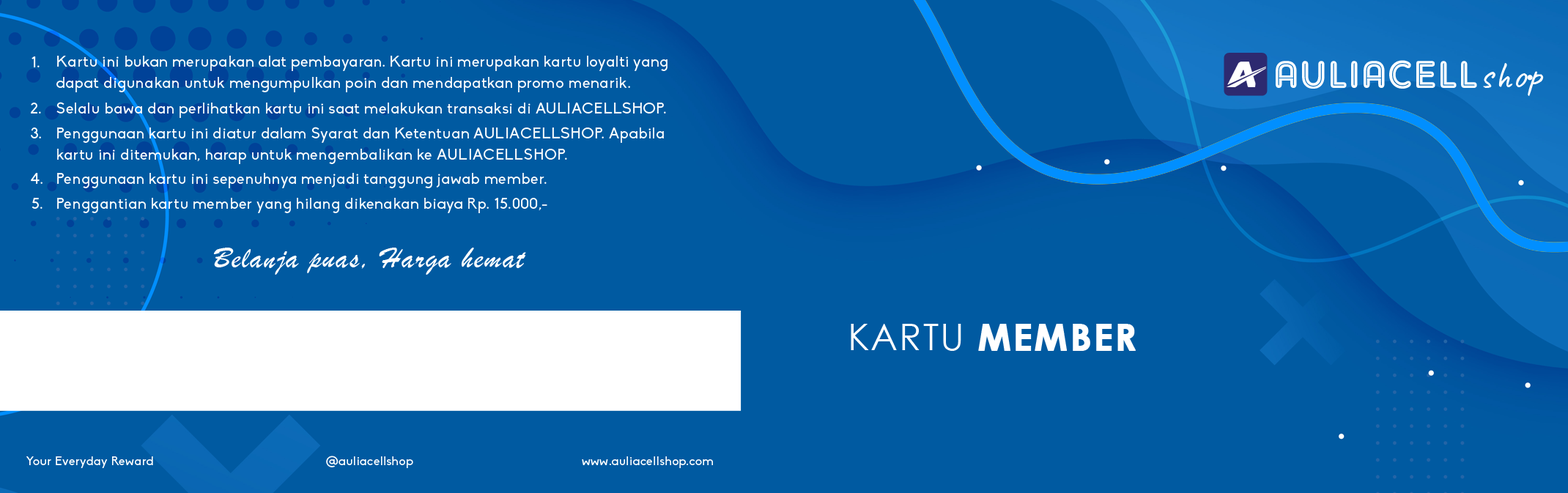
<style>
.page{position:relative;width:1568px;height:493px;background:#005aa1}
.page>*{position:absolute;margin:0}
.t1{font:15.3px "Biko";letter-spacing:0.04em;color:#ffffff}
.t2{font:15.3px/21.4px "Biko";letter-spacing:0.04em;color:#ffffff}
.t3{font:37.9px "AdamGorry-Inline";letter-spacing:0.04em;color:#ffffff}
.t4{font:37.9px "Caveat-Regular";letter-spacing:0.04em;color:#ffffff}
.t5{font:30.5px "BrushScriptMT";letter-spacing:0.04em;color:#ffffff}
.t6{font:36.6px "CenturyGothic-Bold";letter-spacing:0.04em;color:#ffffff;font-weight:bold}
.t7{font:36.6px "CenturyGothic";letter-spacing:0.04em;color:#ffffff}
.t8{font:12.2px "Biko";letter-spacing:0.04em;color:#ffffff}
</style>
<div class="page">
<p class="t1" style="left:32px;top:56px;width:8px;height:11px">1.</p>
<p class="t2" style="left:56px;top:56px;width:611px;height:36px">Kartu ini bukan merupakan alat pembayaran. Kartu ini merupakan kartu loyalti yang <br>dapat digunakan untuk mengumpulkan poin dan mendapatkan promo menarik.</p>
<p class="t3" style="left:1276px;top:60px;width:268px;height:36px">AULIACELL<span class="t4">shop</span></p>
<p class="t1" style="left:56px;top:102px;width:610px;height:16px">Selalu bawa dan perlihatkan kartu ini saat melakukan transaksi di AULIACELLSHOP.</p>
<p class="t1" style="left:31px;top:103px;width:10px;height:11px">2.</p>
<p class="t1" style="left:31px;top:127px;width:10px;height:11px">3.</p>
<p class="t2" style="left:57px;top:127px;width:607px;height:37px">Penggunaan kartu ini diatur dalam Syarat dan Ketentuan AULIACELLSHOP. Apabila<br>kartu ini ditemukan, harap untuk mengembalikan ke AULIACELLSHOP.</p>
<p class="t1" style="left:31px;top:173px;width:11px;height:11px">4.</p>
<p class="t1" style="left:57px;top:173px;width:490px;height:15px">Penggunaan kartu ini sepenuhnya menjadi tanggung jawab member.</p>
<p class="t1" style="left:32px;top:198px;width:10px;height:11px">5.</p>
<p class="t1" style="left:57px;top:198px;width:490px;height:15px">Penggantian kartu member yang hilang dikenakan biaya Rp. 15.000,-</p>
<p class="t5" style="left:213px;top:248px;width:313px;height:27px">Belanja puas, Harga hemat</p>
<p class="t6" style="left:851px;top:324px;width:285px;height:27px"><span class="t7">KARTU </span>MEMBER</p>
<p class="t8" style="left:26px;top:456px;width:127px;height:12px">Your Everyday Reward</p>
<p class="t8" style="left:326px;top:456px;width:87px;height:12px">@auliacellshop</p>
<p class="t8" style="left:582px;top:456px;width:131px;height:12px">www.auliacellshop.com</p>
</div>
